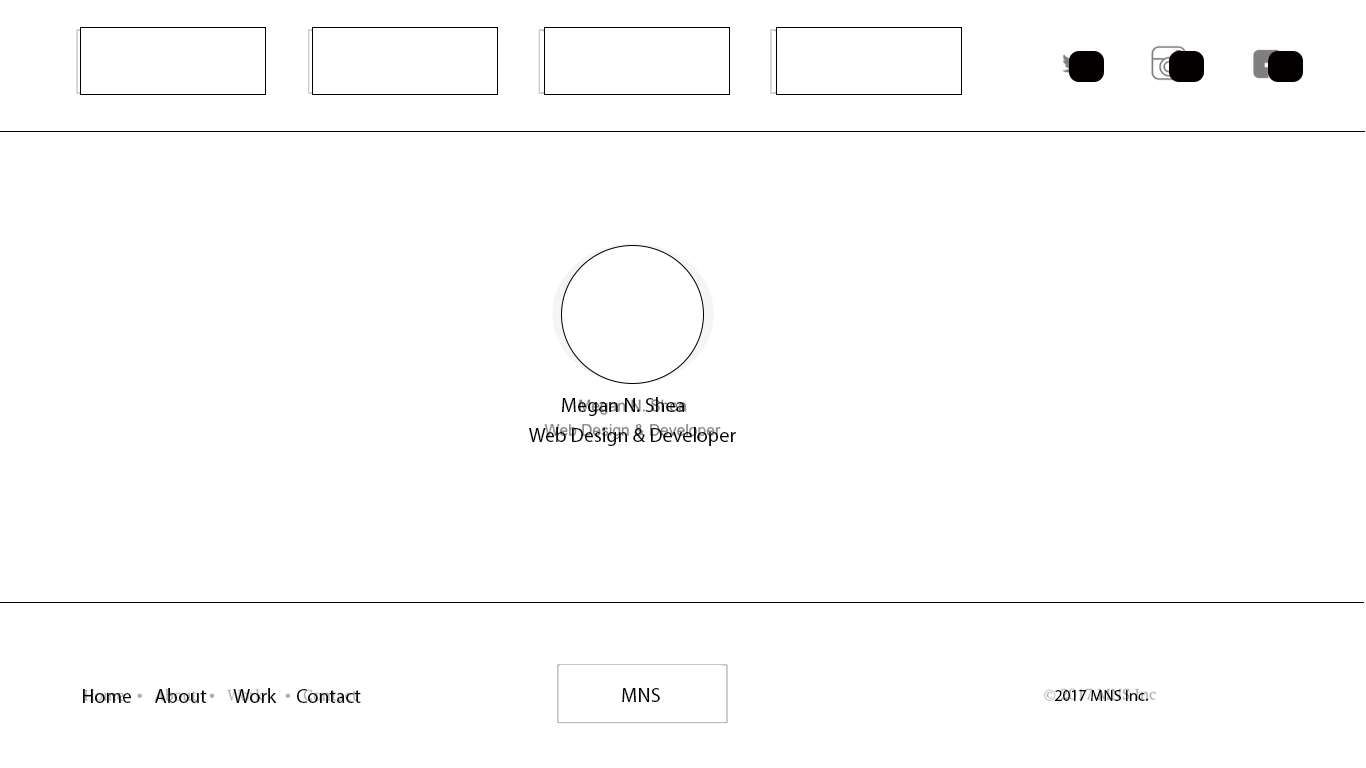
<style>
.page{position:relative;width:1366px;height:768px;background:#ffffff}
.page>*{position:absolute;margin:0}
.t1{font:20px "MyriadPro-Regular";color:#040000}
.t2{font:16px "MyriadPro-Regular";color:#040000}
</style>
<div class="page">
<p class="t1" style="left:562px;top:397px;width:123px;height:19px">Megan N. Shea</p>
<p class="t1" style="left:529px;top:427px;width:207px;height:19px">Web Design &amp; Developer</p>
<p class="t1" style="left:83px;top:689px;width:48px;height:14px">Home</p>
<p class="t1" style="left:155px;top:688px;width:52px;height:15px">About</p>
<p class="t1" style="left:233px;top:688px;width:44px;height:15px">Work</p>
<p class="t1" style="left:297px;top:689px;width:64px;height:14px">Contact</p>
<p class="t1" style="left:622px;top:688px;width:38px;height:14px">MNS</p>
<p class="t2" style="left:1055px;top:690px;width:93px;height:11px">2017 MNS Inc.</p>
</div>
